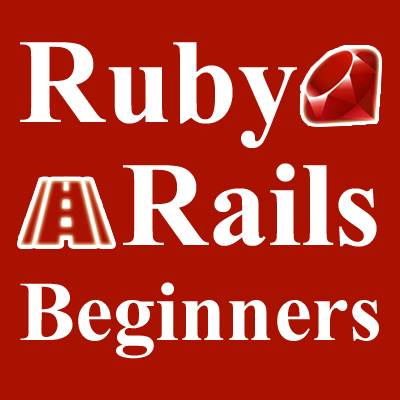
<style>
.page{position:relative;width:400px;height:400px;background:#a91100}
.page>*{position:absolute;margin:0}
.t1{font:120px "TimesNewRomanPS-BoldMT";color:#ffffff}
.t2{font:85px "TimesNewRomanPS-BoldMT";color:#ffffff}
</style>
<div class="page">
<p class="t1" style="left:20px;top:42px;width:277px;height:106px">Ruby</p>
<p class="t1" style="left:123px;top:163px;width:254px;height:84px">Rails</p>
<p class="t2" style="left:20px;top:282px;width:359px;height:77px">Beginners</p>
</div>
